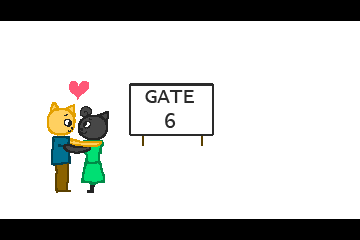
<style>
.page{position:relative;width:360px;height:240px;background:#ffffff}
.page>*{position:absolute;margin:0}
.t1{font:20.8px "LucidaConsole";color:#2a2a2a}
</style>
<div class="page">
<p class="t1" style="left:145px;top:90px;width:49px;height:38px;text-align:center">GATE<br>6</p>
</div>
